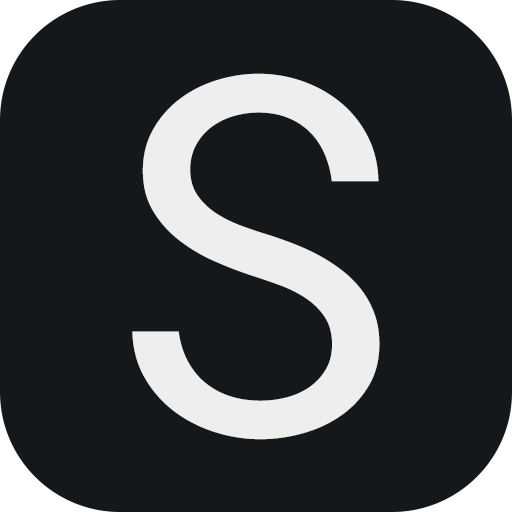
<style>
.page{position:relative;width:512px;height:512px;background:#15181a}
.page>*{position:absolute;margin:0}
.t1{font:500px "RobotoMono-Regular";color:#eeeeee}
</style>
<div class="page">
<p class="t1" style="left:132px;top:73px;width:248px;height:367px">S</p>
</div>
